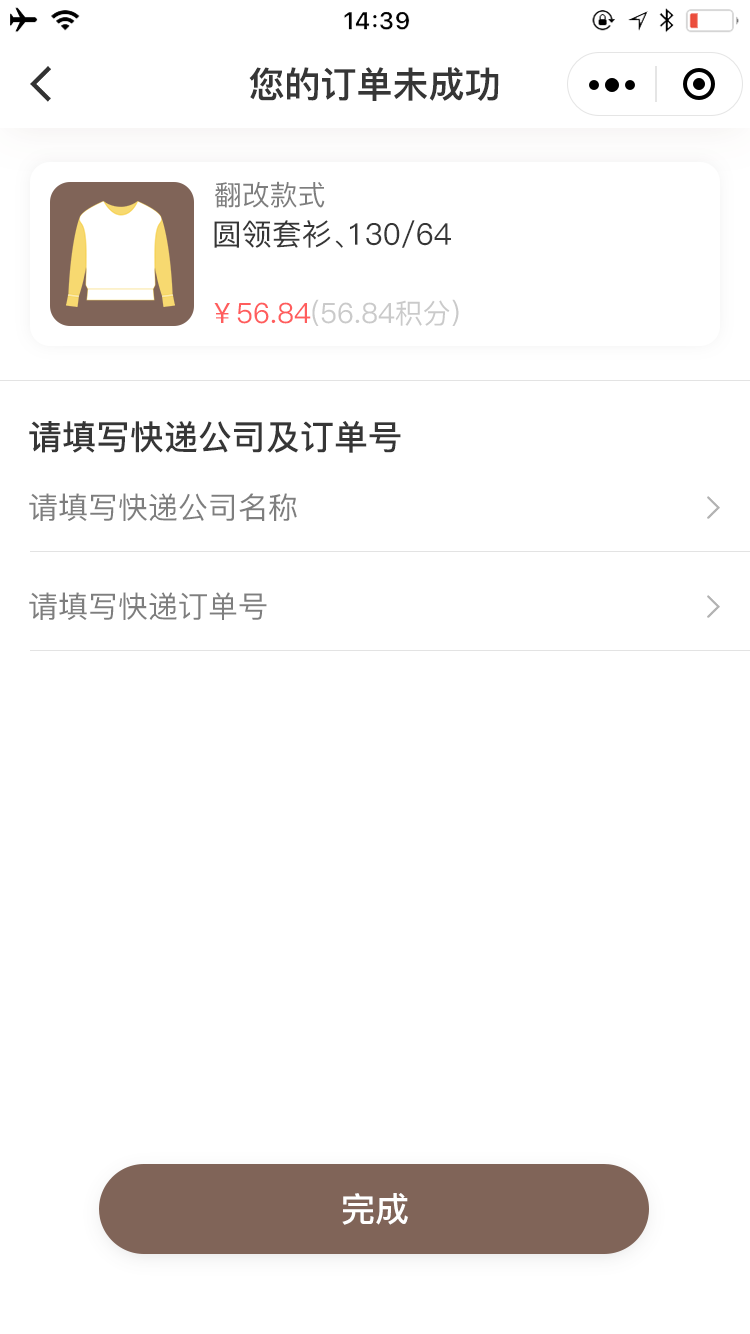
<style>
.page{position:relative;width:750px;height:1334px;background:#ffffff}
.page>*{position:absolute;margin:0}
.t1{font:36px "PingFang-SC-Heavy";color:#363636}
.t2{font:28px "PingFang-SC-Medium";color:#7e7e7e}
.t3{font:30px "PingFang-SC-Medium";color:#363636}
.t4{font:28px "PingFang-SC-Medium";color:#cacaca}
.t5{font:28px "PingFang-SC-Medium";color:#ff5d5d}
.t6{font:34px "PingFang-SC-Bold";color:#363636}
.t7{font:30px "PingFang-SC-Medium";color:#7e7e7e}
.t8{font:34px "PingFang-SC-Bold";color:#ffffff}
</style>
<div class="page">
<p class="t1" style="left:249px;top:67px;width:250px;height:34px">您的订单未成功</p>
<p class="t2" style="left:215px;top:181px;width:110px;height:27px">翻改款式</p>
<p class="t3" style="left:214px;top:220px;width:237px;height:28px">圆领套衫、130/64</p>
<p class="t4" style="left:214px;top:299px;width:245px;height:27px"><span class="t5">￥56.84</span>(56.84积分)</p>
<p class="t6" style="left:29px;top:420px;width:372px;height:33px">请填写快递公司及订单号</p>
<p class="t7" style="left:29px;top:493px;width:268px;height:28px">请填写快递公司名称</p>
<p class="t7" style="left:29px;top:592px;width:238px;height:28px">请填写快递订单号</p>
<p class="t8" style="left:342px;top:1193px;width:66px;height:32px">完成</p>
</div>
